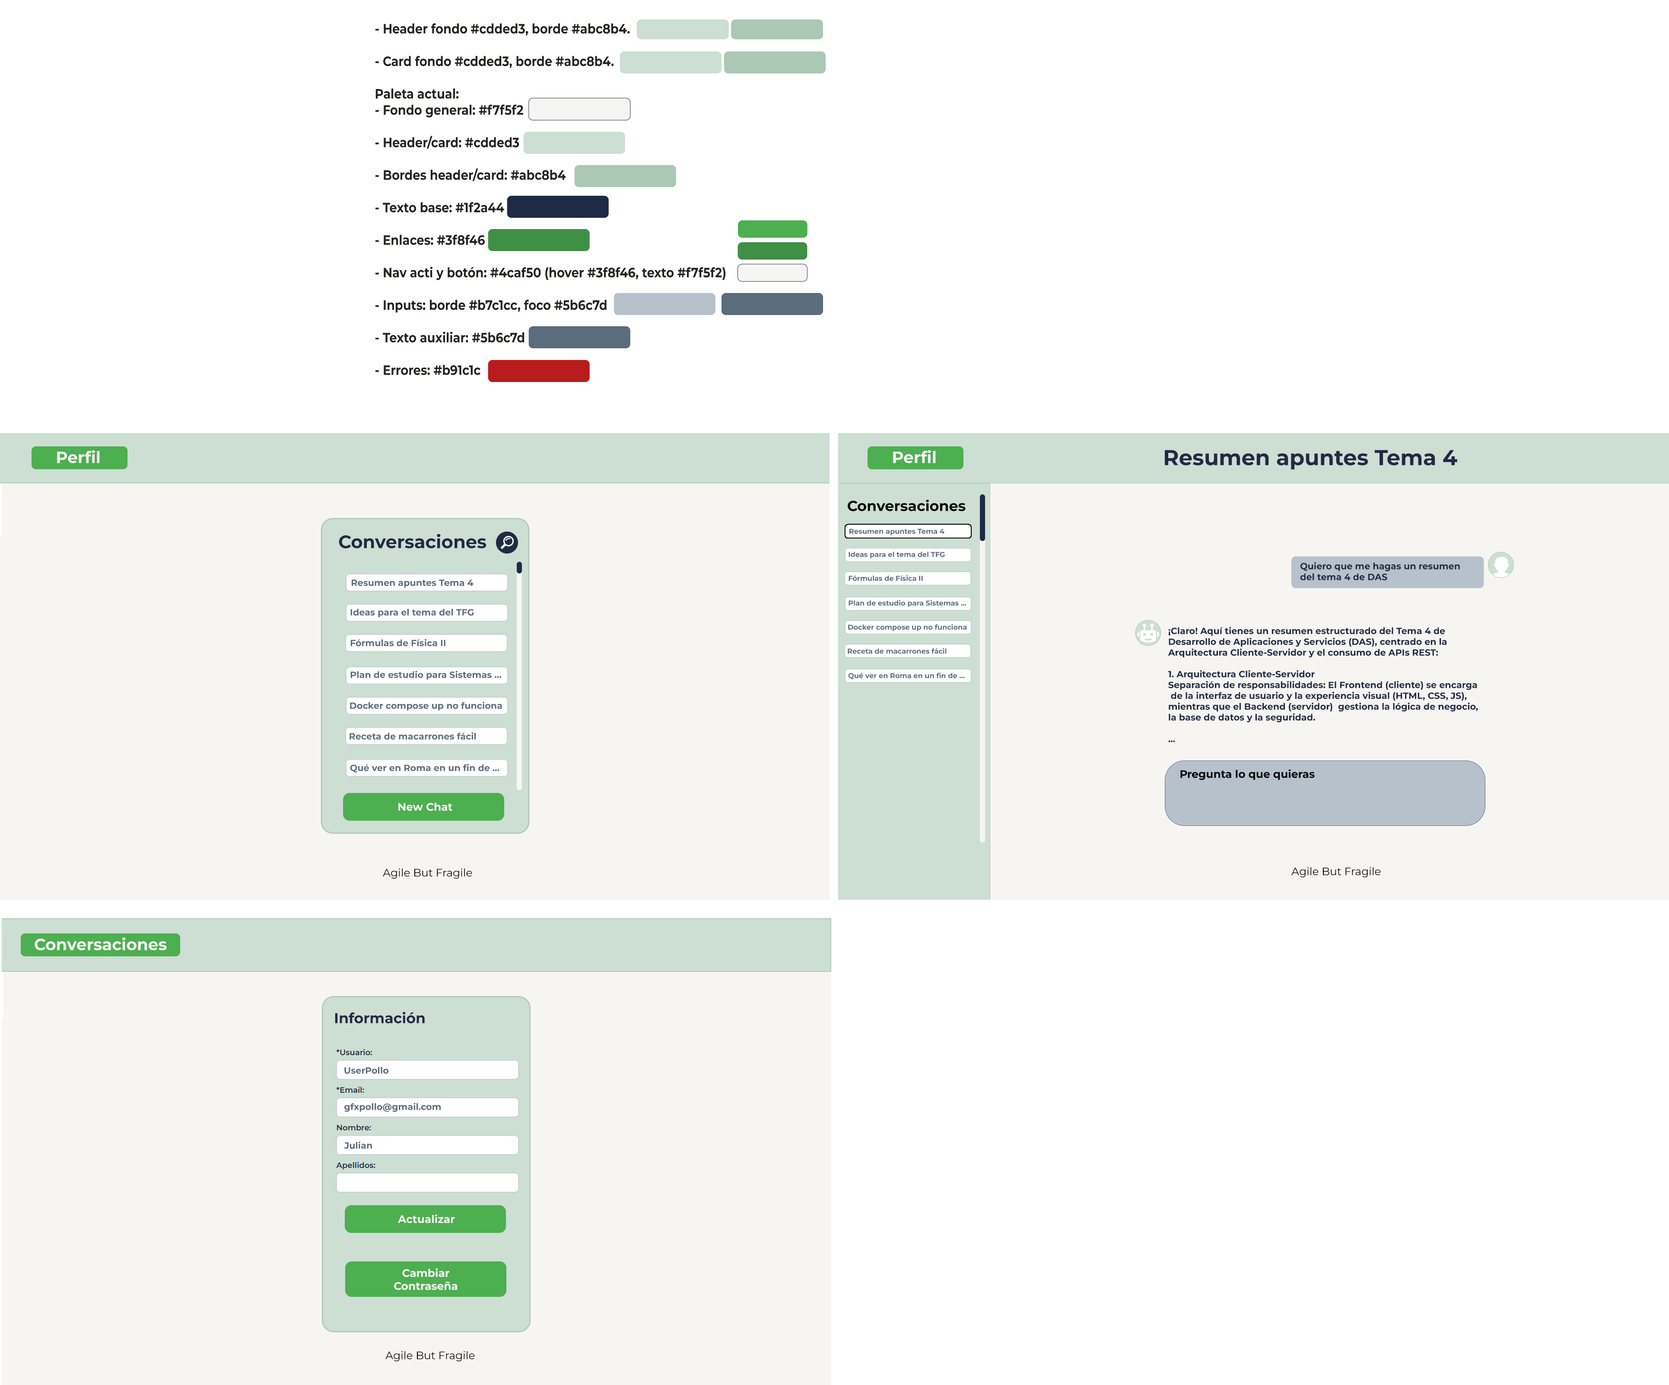
<style>
.page{position:relative;width:1669px;height:1385px;background:#ffffff}
.page>*{position:absolute;margin:0}
.t1{font:13.5px "Montserrat-Bold";color:#25211f;scale:0.87 1}
.t2{font:16.3px "Montserrat-Bold";color:#f7f5f2}
.t3{font:21.6px "Montserrat-Bold";color:#1f2a44}
.t4{font:16.2px "Montserrat-Bold";color:#f7f5f2}
.t5{font:14.4px "Montserrat-Bold";color:#000000}
.t6{font:18.1px "Montserrat-Bold";color:#1f2a44}
.t7{font:7px "Montserrat-Bold";color:#5b6c7d}
.t8{font:9.1px "Montserrat-Bold";color:#1f2a44}
.t9{font:9px "Montserrat-Bold";color:#5b6c7d}
.t10{font:9px "Montserrat-Bold";color:#1f2a44}
.t11{font:10.8px "Montserrat-Bold";color:#000000}
.t12{font:10.8px "Montserrat-Bold";color:#f7f5f2}
.t13{font:10.8px "Montserrat-Regular";color:#000000}
.t14{font:14.4px "Montserrat-Bold";color:#1f2a44}
</style>
<div class="page">
<p class="t1" style="left:375px;top:23px;width:350px;height:352px;text-align:justify">- Header fondo #cdded3, borde #abc8b4.<br><br>- Card fondo #cdded3, borde #abc8b4.<br><br>Paleta actual:<br>- Fondo general: #f7f5f2<br><br>- Header/card: #cdded3<br><br>- Bordes header/card: #abc8b4<br><br>- Texto base: #1f2a44<br><br>- Enlaces: #3f8f46<br><br>- Nav acti y botón: #4caf50 (hover #3f8f46, texto #f7f5f2)<br><br>- Inputs: borde #b7c1cc, foco #5b6c7d<br><br>- Texto auxiliar: #5b6c7d<br><br>- Errores: #b91c1c</p>
<p class="t2" style="left:893px;top:450px;width:43px;height:13px">Perfil</p>
<p class="t3" style="left:1165px;top:450px;width:292px;height:20px">Resumen apuntes Tema 4</p>
<p class="t4" style="left:57px;top:450px;width:43px;height:13px">Perfil</p>
<p class="t5" style="left:848px;top:499px;width:118px;height:12px">Conversaciones</p>
<p class="t6" style="left:339px;top:534px;width:147px;height:14px">Conversaciones</p>
<p class="t7" style="left:849px;top:528px;width:95px;height:7px">Resumen apuntes Tema 4</p>
<p class="t7" style="left:848px;top:551px;width:97px;height:7px">Ideas para el tema del TFG</p>
<p class="t8" style="left:1300px;top:562px;width:160px;height:18px;text-align:justify">Quiero que me hagas un resumen<br>del tema 4 de DAS</p>
<p class="t9" style="left:352px;top:579px;width:121px;height:9px">Resumen apuntes Tema 4</p>
<p class="t7" style="left:848px;top:575px;width:75px;height:6px">Fórmulas de Física II</p>
<p class="t7" style="left:848px;top:600px;width:118px;height:7px">Plan de estudio para Sistemas ...</p>
<p class="t9" style="left:350px;top:608px;width:124px;height:9px">Ideas para el tema del TFG</p>
<p class="t7" style="left:848px;top:624px;width:119px;height:7px">Docker compose up no funciona</p>
<p class="t10" style="left:1168px;top:627px;width:310px;height:115px;text-align:justify">¡Claro! Aquí tienes un resumen estructurado del Tema 4 de <br>Desarrollo de Aplicaciones y Servicios (DAS), centrado en la <br>Arquitectura Cliente-Servidor y el consumo de APIs REST:<br><br>1. Arquitectura Cliente-Servidor<br>Separación de responsabilidades: El Frontend (cliente) se encarga<br> de la interfaz de usuario y la experiencia visual (HTML, CSS, JS), <br>mientras que el Backend (servidor)  gestiona la lógica de negocio, <br>la base de datos y la seguridad. <br><br>...</p>
<p class="t9" style="left:350px;top:639px;width:95px;height:7px">Fórmulas de Física II</p>
<p class="t7" style="left:848px;top:648px;width:99px;height:6px">Receta de macarrones fácil</p>
<p class="t9" style="left:350px;top:670px;width:151px;height:10px">Plan de estudio para Sistemas ...</p>
<p class="t7" style="left:848px;top:672px;width:117px;height:7px">Qué ver en Roma en un fin de ...</p>
<p class="t9" style="left:350px;top:702px;width:152px;height:9px">Docker compose up no funciona</p>
<p class="t9" style="left:349px;top:732px;width:127px;height:8px">Receta de macarrones fácil</p>
<p class="t9" style="left:350px;top:764px;width:149px;height:8px">Qué ver en Roma en un fin de ...</p>
<p class="t11" style="left:1180px;top:769px;width:135px;height:11px">Pregunta lo que quieras</p>
<p class="t12" style="left:398px;top:802px;width:54px;height:9px">New Chat</p>
<p class="t13" style="left:383px;top:868px;width:89px;height:11px">Agile But Fragile</p>
<p class="t13" style="left:1291px;top:867px;width:90px;height:10px">Agile But Fragile</p>
<p class="t4" style="left:35px;top:937px;width:132px;height:13px">Conversaciones</p>
<p class="t14" style="left:335px;top:1011px;width:90px;height:12px">Información</p>
<p class="t9" style="left:344px;top:1067px;width:45px;height:7px">UserPollo</p>
<p class="t9" style="left:344px;top:1102px;width:97px;height:10px">gfxpollo@gmail.com</p>
<p class="t9" style="left:344px;top:1141px;width:28px;height:8px">Julian</p>
<p class="t12" style="left:397px;top:1214px;width:58px;height:9px">Actualizar</p>
<p class="t12" style="left:394px;top:1268px;width:63px;height:22px;text-align:center">Cambiar<br>Contraseña</p>
<p class="t13" style="left:385px;top:1350px;width:90px;height:11px">Agile But Fragile</p>
</div>
